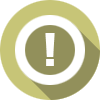
<style>
.page{position:relative;width:100px;height:100px;background:#ffffff}
.page>*{position:absolute;margin:0}
.t1{font:42px "Impact";color:#fefefe}
</style>
<div class="page">
<p class="t1" style="left:45px;top:33px;width:10px;height:33px">!</p>
</div>
